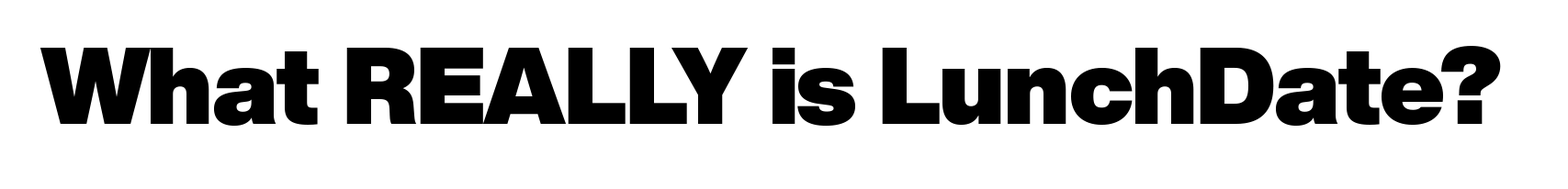
<style>
.page{position:relative;width:1568px;height:189px;background:#ffffff}
.page>*{position:absolute;margin:0}
.t1{font:107.2px "HelveticaNowDisplay-XBlk";letter-spacing:-0.01em;color:#000000}
</style>
<div class="page">
<p class="t1" style="left:39px;top:46px;width:1462px;height:81px">What REALLY is LunchDate?</p>
</div>
